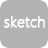
<style>
.page{position:relative;width:48px;height:48px;background:#b2b2b2}
.page>*{position:absolute;margin:0}
.t1{font:14px "MicrosoftYaHeiLight";color:#ffffff;font-weight:bold}
</style>
<div class="page">
<p class="t1" style="left:4px;top:16px;width:41px;height:12px">sketch</p>
</div>
